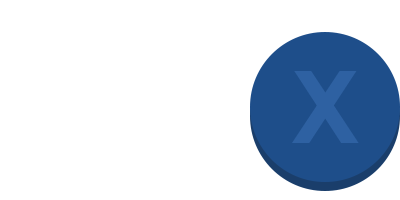
<style>
.page{position:relative;width:400px;height:200px;background:#ffffff}
.page>*{position:absolute;margin:0}
.t1{font:100px "Arial-BoldMT";color:#2e61a2}
</style>
<div class="page">
<p class="t1" style="left:292px;top:71px;width:67px;height:72px">X</p>
</div>
